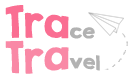
<style>
.page{position:relative;width:133px;height:79px;background:#ffffff}
.page>*{position:absolute;margin:0}
.t1{font:36px/8px "KGSecondChancesSolid";color:#fa6e92}
.t2{font:18px/8px "KGSecondChancesSolid";color:#b2b2b2}
.t3{font:36px/8px "KGSecondChancesSolid";color:#f989a6}
</style>
<div class="page">
<p class="t1" style="left:5px;top:5px;width:95px;height:69px">Tra<span class="t2">ce <br></span><span class="t3">Tra</span><span class="t2">vel</span></p>
</div>
